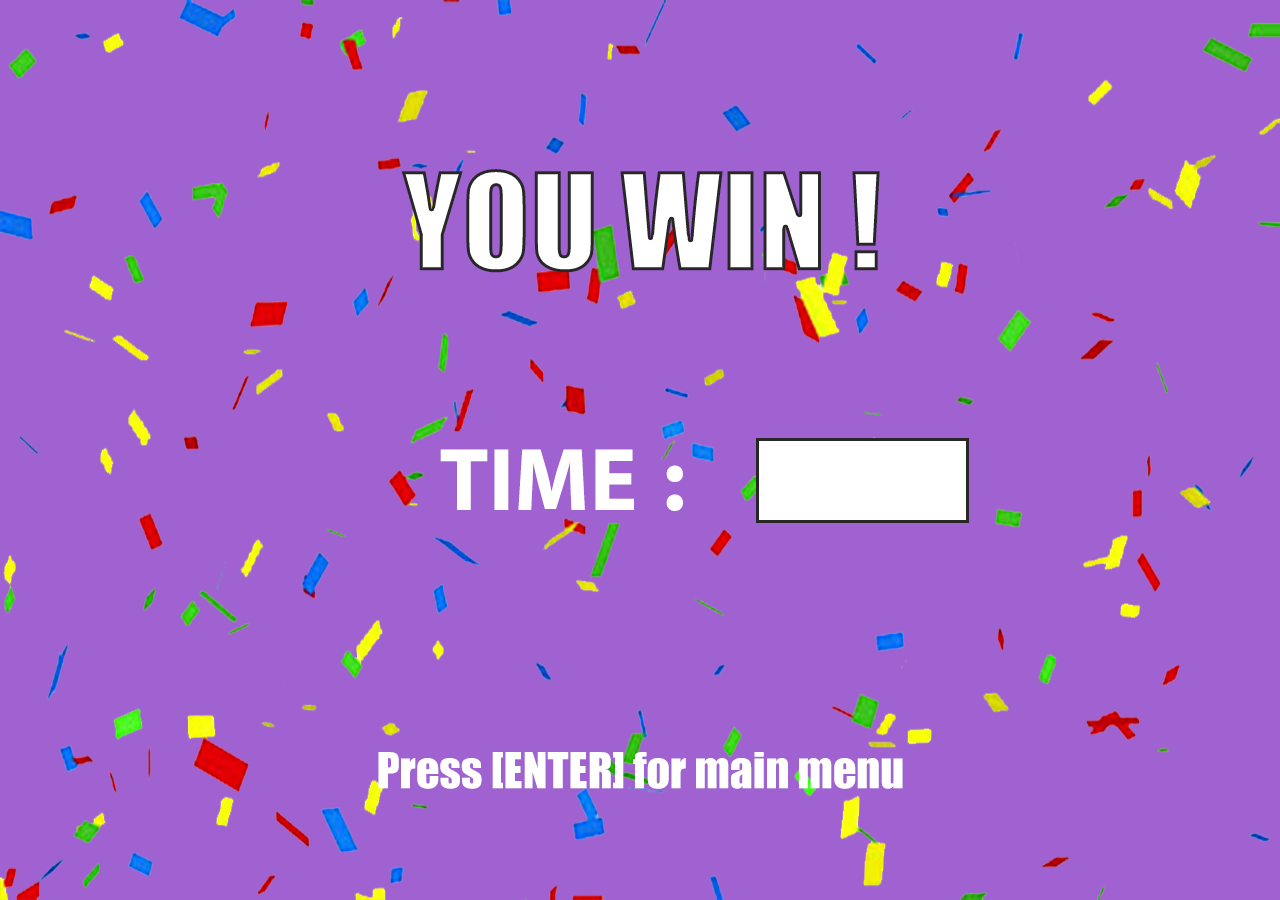
<style>
.page{position:relative;width:1280px;height:900px;background:#a062d0}
.page>*{position:absolute;margin:0}
.t1{font:125px "Impact";color:#ffffff}
.t2{font:125px "MyriadArabic-Bold";color:#ffffff}
.t3{font:45.8px "Impact";color:#ffffff}
</style>
<div class="page">
<p class="t1" style="left:401px;top:169px;width:479px;height:104px">YOU WIN !</p>
<p class="t2" style="left:440px;top:449px;width:243px;height:62px">TIME :</p>
<p class="t3" style="left:378px;top:752px;width:525px;height:37px">Press [ENTER] for main menu</p>
</div>
